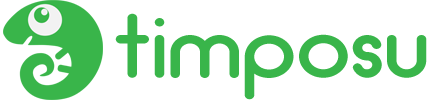
<style>
.page{position:relative;width:443px;height:100px;background:#ffffff}
.page>*{position:absolute;margin:0}
.t1{font:85.5px "Arciform";color:#39b54a;scale:1.14 1}
</style>
<div class="page">
<p class="t1" style="left:115px;top:13px;width:312px;height:87px">timposu</p>
</div>
